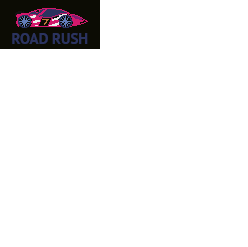
<style>
.page{position:relative;width:248px;height:247px;background:#ffffff}
.page>*{position:absolute;margin:0}
.t1{font:15px "PTSans-Bold";color:#2b335f}
</style>
<div class="page">
<p class="t1" style="left:12px;top:33px;width:76px;height:11px">ROAD RUSH</p>
</div>
